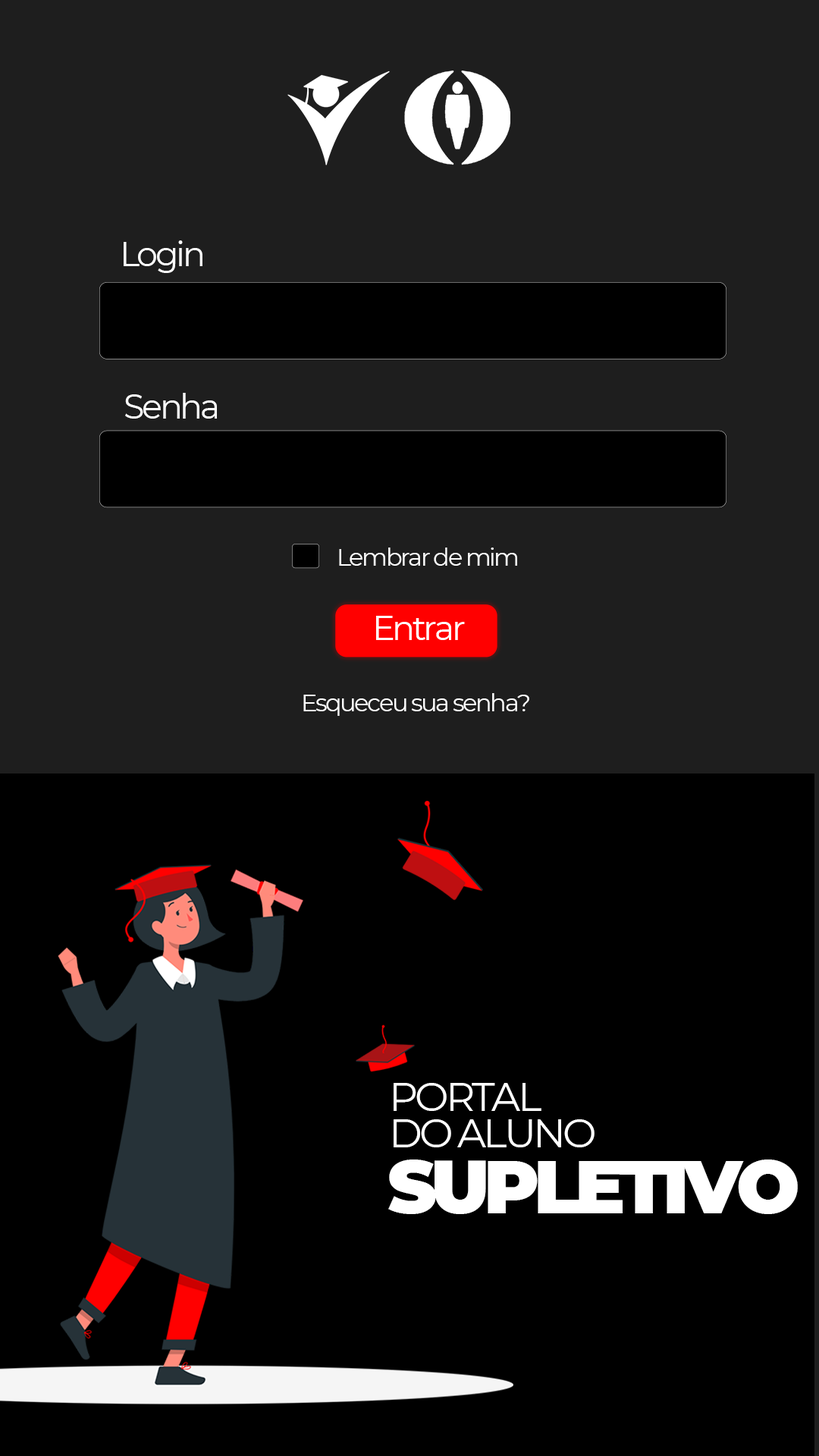
<style>
.page{position:relative;width:819px;height:1456px;background:#000000}
.page>*{position:absolute;margin:0}
.t1{font:33.7px "Montserrat-Regular";letter-spacing:-0.075em;color:#ffffff}
.t2{font:24.3px "Montserrat-Regular";letter-spacing:-0.075em;color:#ffffff}
.t3{font:40.2px "Montserrat-Regular";letter-spacing:-0.075em;color:#ffffff}
.t4{font:74.8px "Montserrat-Black";letter-spacing:-0.075em;color:#ffffff}
</style>
<div class="page">
<p class="t1" style="left:124px;top:240px;width:78px;height:33px">Login</p>
<p class="t1" style="left:125px;top:393px;width:92px;height:26px">Senha</p>
<p class="t2" style="left:339px;top:548px;width:178px;height:18px">Lembrar de mim</p>
<p class="t1" style="left:376px;top:616px;width:89px;height:24px">Entrar</p>
<p class="t2" style="left:303px;top:693px;width:226px;height:23px">Esqueceu sua senha?</p>
<p class="t3" style="left:394px;top:1083px;width:147px;height:28px">PORTAL</p>
<p class="t3" style="left:394px;top:1119px;width:201px;height:28px">DO ALUNO</p>
<p class="t4" style="left:388px;top:1159px;width:410px;height:55px">SUPLETIVO</p>
</div>
